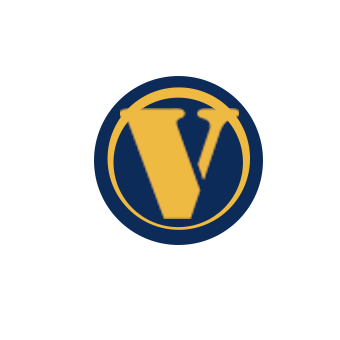
<style>
.page{position:relative;width:340px;height:340px;background:#ffffff}
.page>*{position:absolute;margin:0}
.t1{font:146.2px "StencilStd";color:#efba42;scale:1.24 1}
</style>
<div class="page">
<p class="t1" style="left:120px;top:108px;width:119px;height:111px">V</p>
</div>
